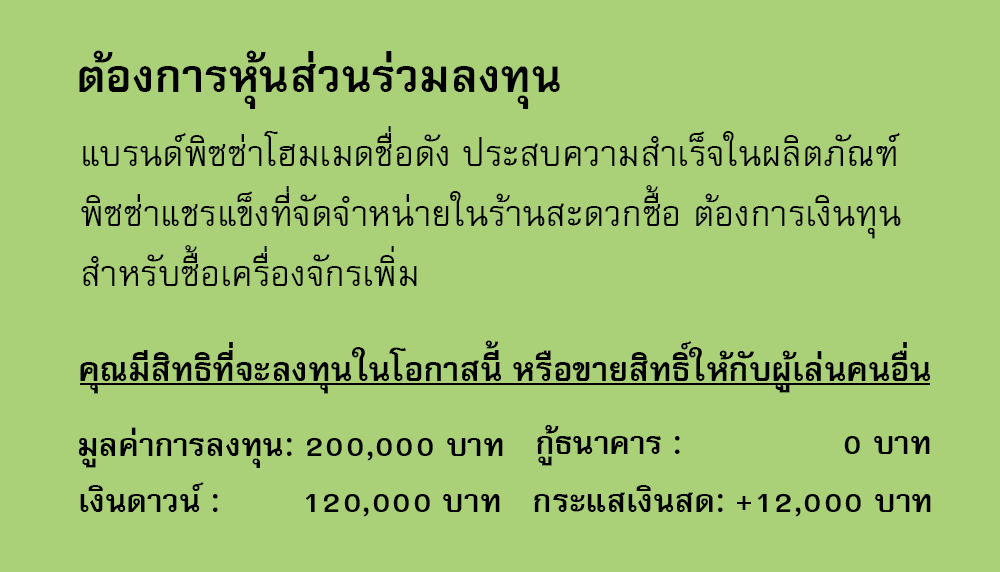
<style>
.page{position:relative;width:1000px;height:572px;background:#aad178}
.page>*{position:absolute;margin:0}
.t1{font:64px "FreesiaUPCBold";color:#000000}
.t2{font:50px/60px "FreesiaUPC";color:#000000}
.t3{font:47px "FreesiaUPCBold";color:#000000}
.t4{font:45px "FreesiaUPCBold";color:#000000}
</style>
<div class="page">
<p class="t1" style="left:79px;top:50px;width:481px;height:59px">ต้องการหุ้นส่วนร่วมลงทุน</p>
<p class="t2" style="left:81px;top:126px;width:820px;height:160px">แบรนด์พิซซ่าโฮมเมดชื่อดัง ประสบความสำเร็จในผลิตภัณฑ์<br>พิซซ่าแชรแข็งที่จัดจำหน่ายในร้านสะดวกซื้อ ต้องการเงินทุน<br>สำหรับซื้อเครื่องจักรเพิ่ม</p>
<p class="t3" style="left:80px;top:340px;width:851px;height:54px">คุณมีสิทธิที่จะลงทุนในโอกาสนี้ หรือขายสิทธิ์ให้กับผู้เล่นคนอื่น</p>
<p class="t4" style="left:537px;top:425px;width:393px;height:41px">กู้ธนาคาร :                0 บาท</p>
<p class="t4" style="left:78px;top:427px;width:425px;height:41px">มูลค่าการลงทุน: 200,000 บาท</p>
<p class="t4" style="left:80px;top:481px;width:420px;height:36px">เงินดาวน์ :        120,000 บาท</p>
<p class="t4" style="left:534px;top:485px;width:397px;height:32px">กระแสเงินสด: +12,000 บาท</p>
</div>
